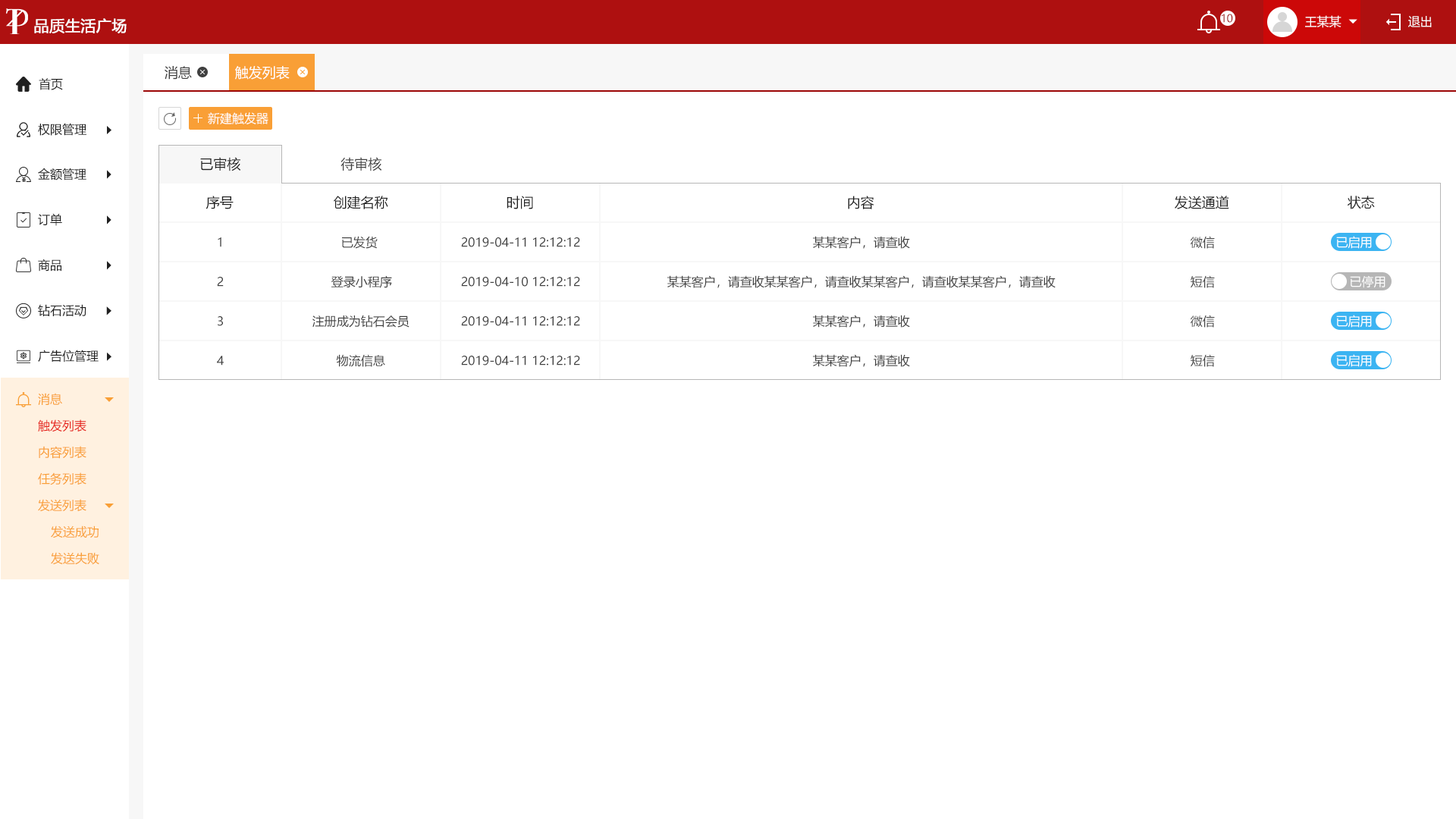
<style>
.page{position:relative;width:1456px;height:819px;background:#ffffff}
.page>*{position:absolute;margin:0}
.t1{font:10.6px "MicrosoftYaHei";color:#9c0606;text-transform:uppercase}
.t2{font:12.1px "MicrosoftYaHei";color:#ffffff;text-transform:uppercase}
.t3{font:15.2px "MicrosoftYaHei";color:#ffffff;text-transform:uppercase;font-weight:bold}
.t4{font:13.6px "MicrosoftYaHei";color:#404040;text-transform:uppercase}
.t5{font:13.6px "MicrosoftYaHei";color:#ffffff;text-transform:uppercase}
.t6{font:12.1px "MicrosoftYaHei";color:#202020;text-transform:uppercase}
.t7{font:13.6px "MicrosoftYaHei";color:#202020;text-transform:uppercase}
.t8{font:12.1px "MicrosoftYaHei";color:#404040;text-transform:uppercase}
.t9{font:12.1px "MicrosoftYaHei";color:#f99f36;text-transform:uppercase}
.t10{font:12.1px "MicrosoftYaHei";color:#e61f18;text-transform:uppercase}
</style>
<div class="page">
<p class="t1" style="left:1222px;top:14px;width:11px;height:9px">10</p>
<p class="t2" style="left:1305px;top:15px;width:36px;height:13px">王某某</p>
<p class="t2" style="left:1408px;top:16px;width:24px;height:11px">退出</p>
<p class="t3" style="left:34px;top:18px;width:93px;height:15px">品质生活广场</p>
<p class="t4" style="left:165px;top:66px;width:27px;height:14px">消息</p>
<p class="t5" style="left:235px;top:66px;width:55px;height:14px">触发列表</p>
<p class="t6" style="left:39px;top:78px;width:24px;height:12px">首页</p>
<p class="t2" style="left:208px;top:112px;width:60px;height:12px">新建触发器</p>
<p class="t6" style="left:38px;top:123px;width:48px;height:13px">权限管理</p>
<p class="t7" style="left:200px;top:157px;width:41px;height:14px">已审核</p>
<p class="t4" style="left:340px;top:157px;width:42px;height:14px">待审核</p>
<p class="t6" style="left:38px;top:168px;width:48px;height:12px">金额管理</p>
<p class="t7" style="left:206px;top:196px;width:28px;height:13px">序号</p>
<p class="t7" style="left:334px;top:196px;width:54px;height:13px">创建名称</p>
<p class="t7" style="left:507px;top:196px;width:26px;height:13px">时间</p>
<p class="t7" style="left:848px;top:196px;width:26px;height:13px">内容</p>
<p class="t7" style="left:1175px;top:196px;width:54px;height:13px">发送通道</p>
<p class="t7" style="left:1347px;top:196px;width:28px;height:13px">状态</p>
<p class="t6" style="left:38px;top:213px;width:24px;height:13px">订单</p>
<p class="t8" style="left:218px;top:237px;width:3px;height:10px">1</p>
<p class="t8" style="left:342px;top:236px;width:36px;height:13px">已发货</p>
<p class="t8" style="left:461px;top:237px;width:119px;height:10px">2019-04-11 12:12:12</p>
<p class="t8" style="left:813px;top:236px;width:97px;height:13px">某某客户，请查收</p>
<p class="t8" style="left:1191px;top:236px;width:24px;height:13px">微信</p>
<p class="t2" style="left:1336px;top:236px;width:36px;height:13px">已启用</p>
<p class="t6" style="left:38px;top:259px;width:23px;height:12px">商品</p>
<p class="t8" style="left:217px;top:277px;width:7px;height:10px">2</p>
<p class="t8" style="left:331px;top:275px;width:61px;height:13px">登录小程序</p>
<p class="t8" style="left:461px;top:277px;width:119px;height:10px">2019-04-10 12:12:12</p>
<p class="t8" style="left:667px;top:275px;width:389px;height:13px">某某客户，请查收某某客户，请查收某某客户，请查收某某客户，请查收</p>
<p class="t8" style="left:1191px;top:275px;width:24px;height:13px">短信</p>
<p class="t2" style="left:1350px;top:275px;width:35px;height:13px">已停用</p>
<p class="t6" style="left:38px;top:304px;width:48px;height:12px">钻石活动</p>
<p class="t8" style="left:218px;top:316px;width:5px;height:10px">3</p>
<p class="t8" style="left:312px;top:315px;width:97px;height:13px">注册成为钻石会员</p>
<p class="t8" style="left:461px;top:316px;width:119px;height:10px">2019-04-11 12:12:12</p>
<p class="t8" style="left:813px;top:315px;width:97px;height:13px">某某客户，请查收</p>
<p class="t8" style="left:1191px;top:315px;width:24px;height:13px">微信</p>
<p class="t2" style="left:1336px;top:315px;width:36px;height:13px">已启用</p>
<p class="t6" style="left:38px;top:350px;width:61px;height:12px">广告位管理</p>
<p class="t8" style="left:217px;top:356px;width:7px;height:10px">4</p>
<p class="t8" style="left:336px;top:354px;width:49px;height:13px">物流信息</p>
<p class="t8" style="left:461px;top:356px;width:119px;height:10px">2019-04-11 12:12:12</p>
<p class="t8" style="left:813px;top:354px;width:97px;height:13px">某某客户，请查收</p>
<p class="t8" style="left:1191px;top:354px;width:24px;height:13px">短信</p>
<p class="t2" style="left:1336px;top:354px;width:36px;height:13px">已启用</p>
<p class="t9" style="left:38px;top:393px;width:24px;height:12px">消息</p>
<p class="t10" style="left:38px;top:419px;width:48px;height:12px">触发列表</p>
<p class="t9" style="left:39px;top:446px;width:47px;height:13px">内容列表</p>
<p class="t9" style="left:38px;top:472px;width:48px;height:13px">任务列表</p>
<p class="t9" style="left:38px;top:499px;width:48px;height:12px">发送列表</p>
<p class="t9" style="left:51px;top:526px;width:48px;height:12px">发送成功</p>
<p class="t9" style="left:51px;top:552px;width:48px;height:13px">发送失败</p>
</div>
